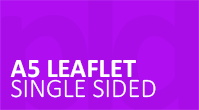
<style>
.page{position:relative;width:199px;height:110px;background:#a80de8}
.page>*{position:absolute;margin:0}
.t1{font:26.6px "Calibri-Bold";color:#ffffff}
.t2{font:26.6px "Calibri-Light";color:#ffffff}
</style>
<div class="page">
<p class="t1" style="left:10px;top:60px;width:126px;height:18px">A5 LEAFLET</p>
<p class="t2" style="left:11px;top:79px;width:145px;height:19px">SINGLE SIDED</p>
</div>
